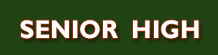
<style>
.page{position:relative;width:218px;height:55px;background:#204313}
.page>*{position:absolute;margin:0}
.t1{font:25.4px "GillSansMT-Bold";color:#fefffd}
</style>
<div class="page">
<p class="t1" style="left:20px;top:20px;width:179px;height:19px">SENIOR  HIGH</p>
</div>
